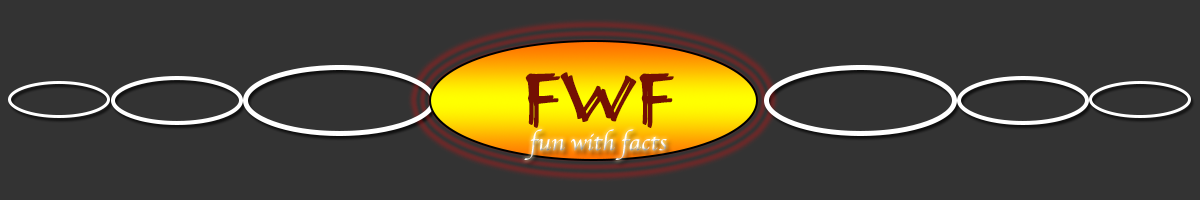
<style>
.page{position:relative;width:1200px;height:200px;background:#333333}
.page>*{position:absolute;margin:0}
.t1{font:77px "Herculanum";color:#741003}
.t2{font:12px "Apple-Chancery";color:#ffffff}
</style>
<div class="page">
<p class="t1" style="left:525px;top:72px;width:144px;height:53px">FWF</p>
<p class="t1" style="left:530px;top:75px;width:144px;height:53px">FWF</p>
<p class="t2" style="left:524px;top:129px;width:143px;height:31px;text-align:center">fun with facts</p>
</div>
